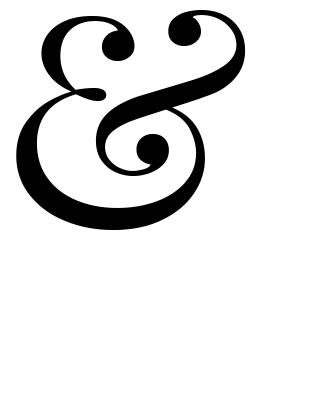
<style>
.page{position:relative;width:323px;height:409px;background:#ffffff}
.page>*{position:absolute;margin:0}
.t1{font:300px "PlayfairDisplay-Regular";letter-spacing:0.1em;color:#000000}
</style>
<div class="page">
<p class="t1" style="left:16px;top:10px;width:230px;height:220px">&amp;</p>
</div>
